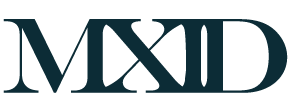
<style>
.page{position:relative;width:288px;height:106px;background:#ffffff}
.page>*{position:absolute;margin:0}
.t1{font:107.7px "EngraversMT";letter-spacing:-0.33em;color:#0c2c36}
</style>
<div class="page">
<p class="t1" style="left:3px;top:19px;width:285px;height:74px">Mxid</p>
</div>
